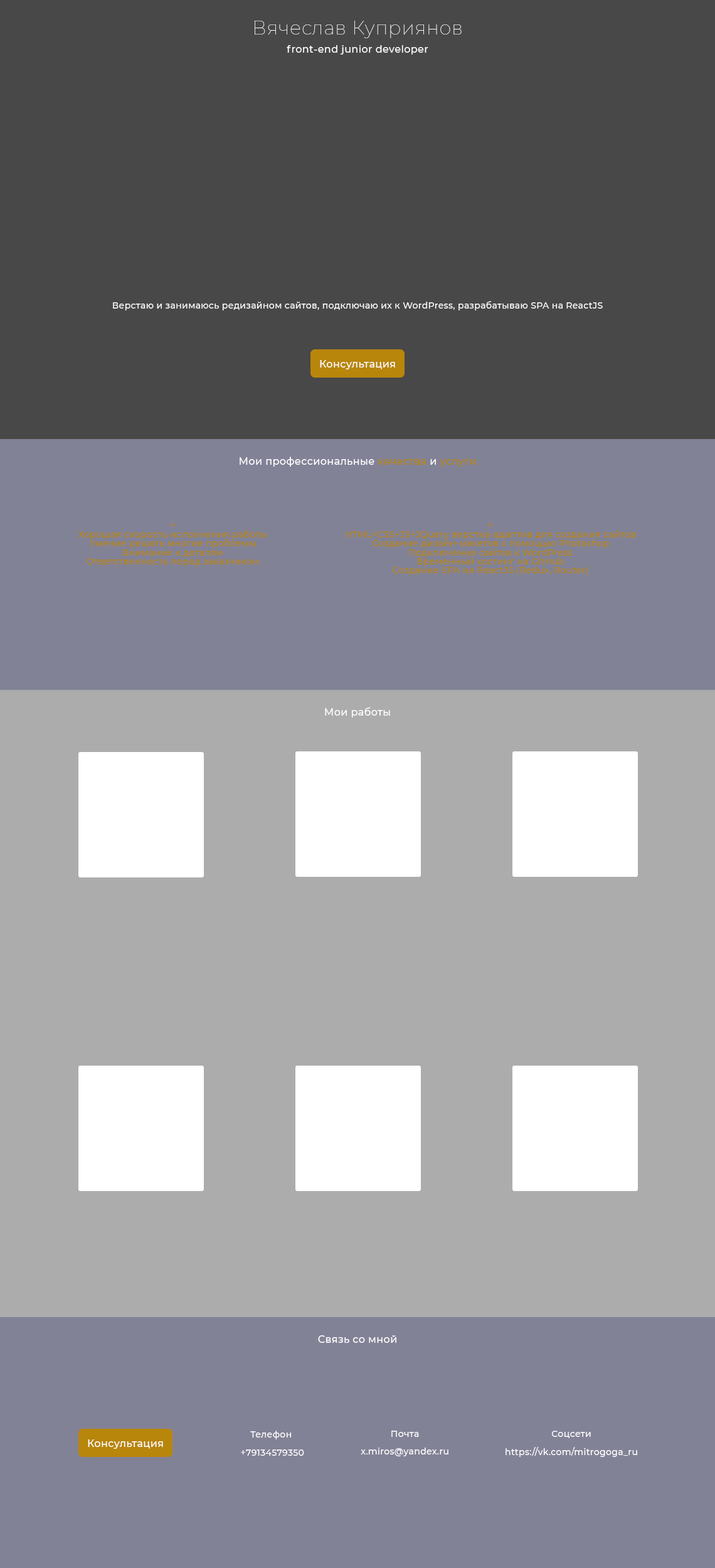
<style>
.page{position:relative;width:715px;height:1568px;background:#acacac}
.page>*{position:absolute;margin:0}
.t1{font:10px/9px "Montserrat-Medium";letter-spacing:0.025em;color:#ffffff}
.t2{font:18.8px/9px "Montserrat-Thin";letter-spacing:0.025em;color:#ffffff}
.t3{font:8.8px "Montserrat-Medium";letter-spacing:0.025em;color:#ffffff}
.t4{font:10px "Montserrat-Medium";letter-spacing:0.025em;color:#ffffff}
.t5{font:10px "Montserrat-Medium";letter-spacing:0.025em;color:#ffd700}
.t6{font:10px "Montserrat-Medium";letter-spacing:0.025em;color:#b8860b}
.t7{font:8.8px/9px "Montserrat-Medium";letter-spacing:0.025em;color:#b8860b}
.t8{font:8.8px/9px "Montserrat-Medium";letter-spacing:0.025em;color:#ffffff}
</style>
<div class="page">
<p class="t1" style="left:255px;top:21px;width:207px;height:34px;text-align:center"><span class="t2">Вячеслав Куприянов<br><br></span>front-end junior developer</p>
<p class="t3" style="left:113px;top:301px;width:490px;height:9px">Верстаю и занимаюсь редизайном сайтов, подключаю их к WordPress, разрабатываю SPA на ReactJS</p>
<p class="t4" style="left:320px;top:360px;width:75px;height:9px"><span class="t5"><br></span>Консультация</p>
<p class="t4" style="left:240px;top:457px;width:235px;height:10px">Мои профессиональные <span class="t6">качества</span> и <span class="t6">услуги</span></p>
<p class="t7" style="left:78px;top:523px;width:189px;height:43px;text-align:center">×<br>Хорошая скорость исполнения работы<br>Умение решать многие проблемы<br>Внимание к деталям<br>Ответственность перед заказчиком</p>
<p class="t7" style="left:346px;top:523px;width:290px;height:52px;text-align:center">×<br>HTML+CSS+JS+JQuery верстка-адаптив для создания сайтов<br>Создание дизайн-макетов с помощью Photoshop<br>Подключение сайтов к WordPress<br>Временный хостинг на GitHub<br>Создание SPA на ReactJS (Redux, Router)</p>
<p class="t4" style="left:325px;top:707px;width:65px;height:11px">Мои работы</p>
<p class="t4" style="left:318px;top:1335px;width:78px;height:8px">Связь со мной</p>
<p class="t8" style="left:241px;top:1431px;width:63px;height:25px;text-align:center">Телефон <br><br>+79134579350</p>
<p class="t8" style="left:361px;top:1431px;width:87px;height:25px;text-align:center">Почта<br><br>x.miros@yandex.ru</p>
<p class="t8" style="left:506px;top:1431px;width:131px;height:26px;text-align:center">Соцсети<br><br>https://vk.com/mitrogoga_ru</p>
<p class="t4" style="left:88px;top:1439px;width:75px;height:10px">Консультация</p>
</div>
